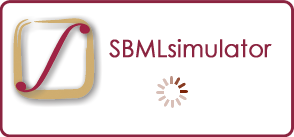
<style>
.page{position:relative;width:294px;height:137px;background:#ffffff}
.page>*{position:absolute;margin:0}
.t1{font:24px "CenturyGothic";color:#8b2440;font-weight:bold;scale:0.95 1}
</style>
<div class="page">
<p class="t1" style="left:109px;top:39px;width:163px;height:19px">SBMLsimulator</p>
</div>
